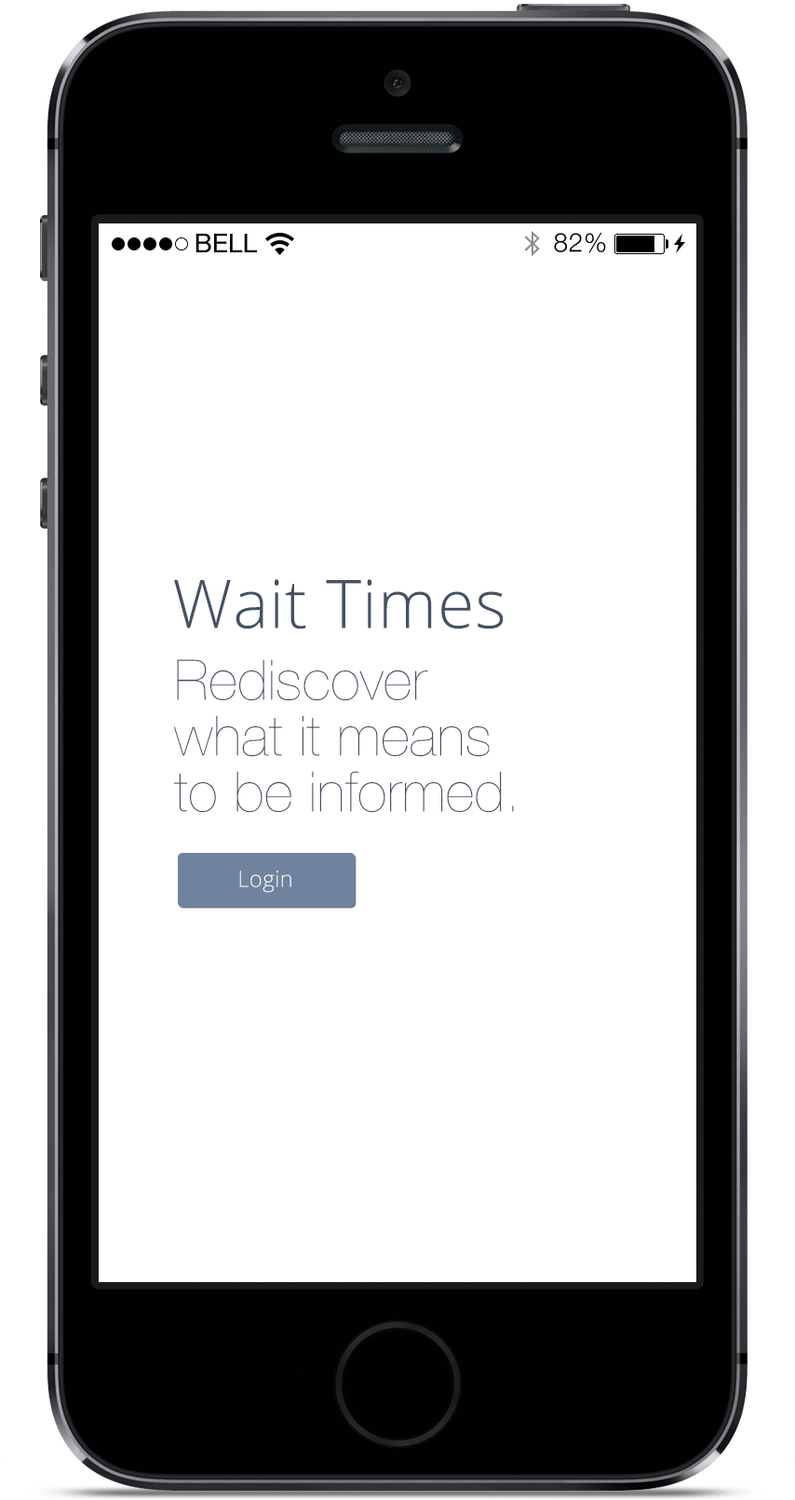
<style>
.page{position:relative;width:795px;height:1500px;background:#ffffff}
.page>*{position:absolute;margin:0}
.t1{font:67px "OpenSans-Light";letter-spacing:0.01em;color:#455163}
.t2{font:55.9px/55.9px "HelveticaNeue-UltraLight";letter-spacing:0.01em;color:#455163}
.t3{font:22.3px "OpenSans-Light";letter-spacing:0.01em;color:#ffffff}
</style>
<div class="page">
<p class="t1" style="left:174px;top:579px;width:330px;height:50px">Wait Times</p>
<p class="t2" style="left:173px;top:659px;width:341px;height:154px">Rediscover<br>what it means<br>to be informed.</p>
<p class="t3" style="left:239px;top:870px;width:52px;height:23px">Login</p>
</div>
